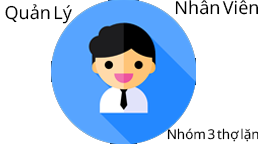
<style>
.page{position:relative;width:258px;height:144px;background:#ffffff}
.page>*{position:absolute;margin:0}
.t1{font:18px "SansSerifCollection";color:#000000}
.t2{font:13.4px "SansSerifCollection";color:#000000}
</style>
<div class="page">
<p class="t1" style="left:5px;top:4px;width:67px;height:20px">Quản Lý</p>
<p class="t1" style="left:175px;top:0px;width:84px;height:15px">Nhân Viên</p>
<p class="t2" style="left:167px;top:128px;width:92px;height:14px">Nhóm 3 thợ lặn</p>
</div>
